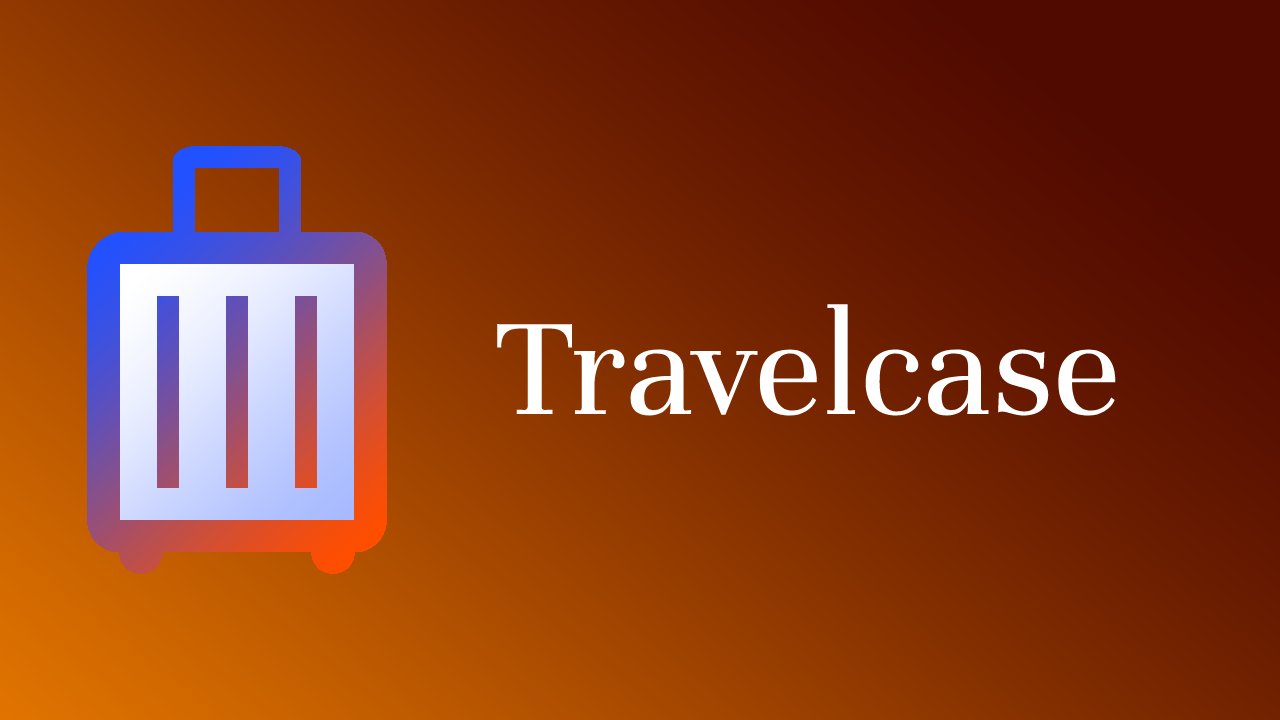
<style>
.page{position:relative;width:1280px;height:720px}
.page>*{position:absolute;margin:0}
.t1{font:150px "Unna-Regular";color:#ffffff}
</style>
<div class="page">
<p class="t1" style="left:497px;top:304px;width:619px;height:112px">Travelcase</p>
</div>
